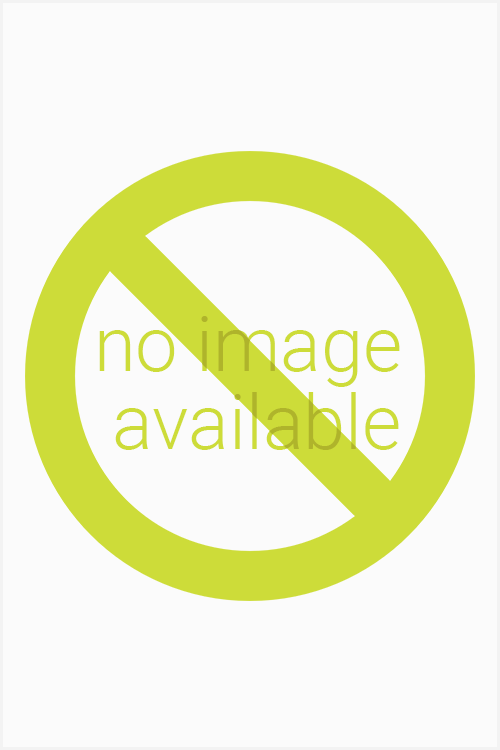
<style>
.page{position:relative;width:500px;height:750px;background:#fbfbfb}
.page>*{position:absolute;margin:0}
.t1{font:75.8px/78px "Roboto-Light";color:#cddc39}
</style>
<div class="page">
<p class="t1" style="left:99px;top:316px;width:301px;height:134px;text-align:center">no image <br>available</p>
<p class="t1" style="left:99px;top:316px;width:301px;height:134px;text-align:center">no image <br>available</p>
</div>
